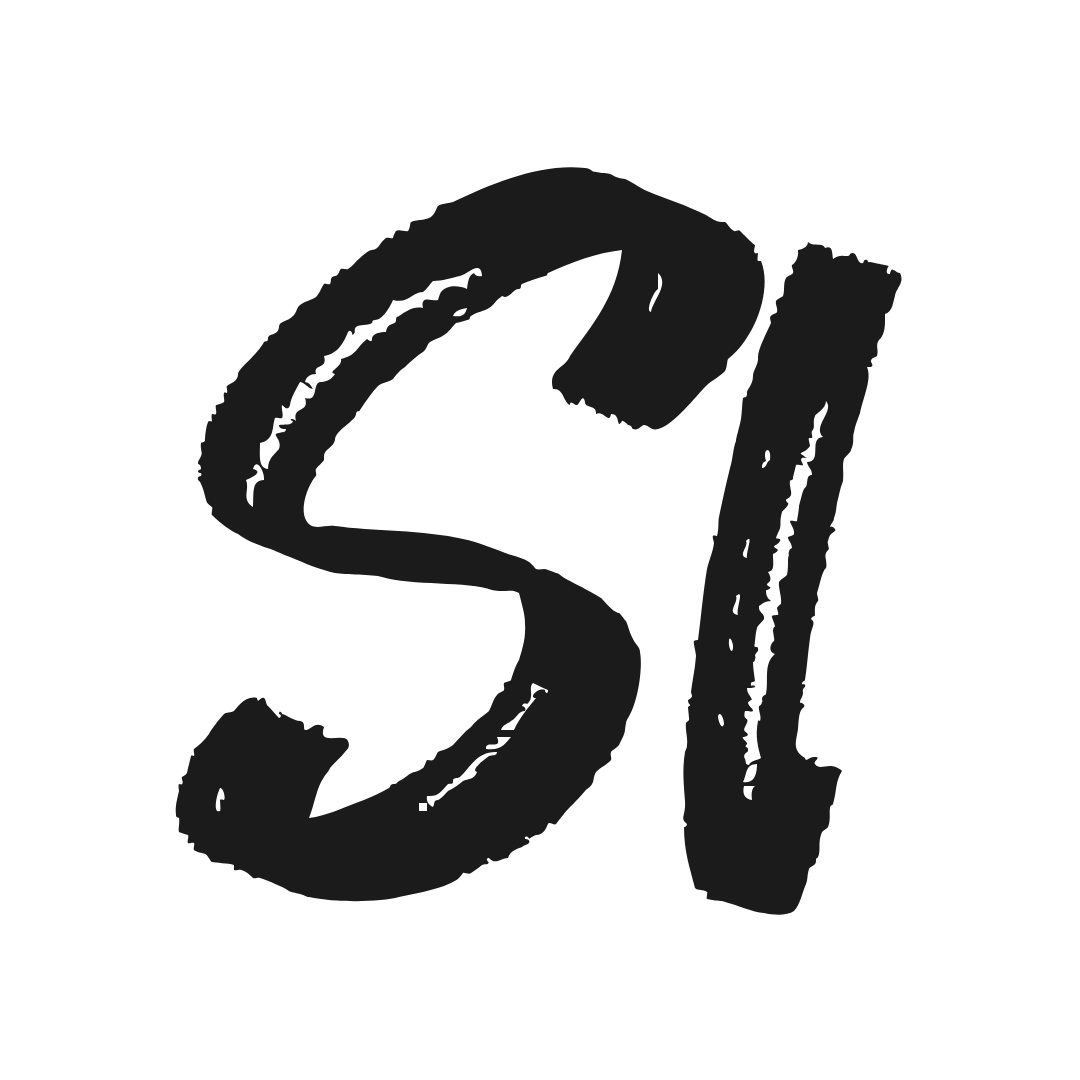
<style>
.page{position:relative;width:1080px;height:1080px;background:#ffffff}
.page>*{position:absolute;margin:0}
.t1{font:1000px "Hey-August";color:#1b1b1b}
</style>
<div class="page">
<p class="t1" style="left:175px;top:163px;width:730px;height:753px">Sl</p>
</div>
